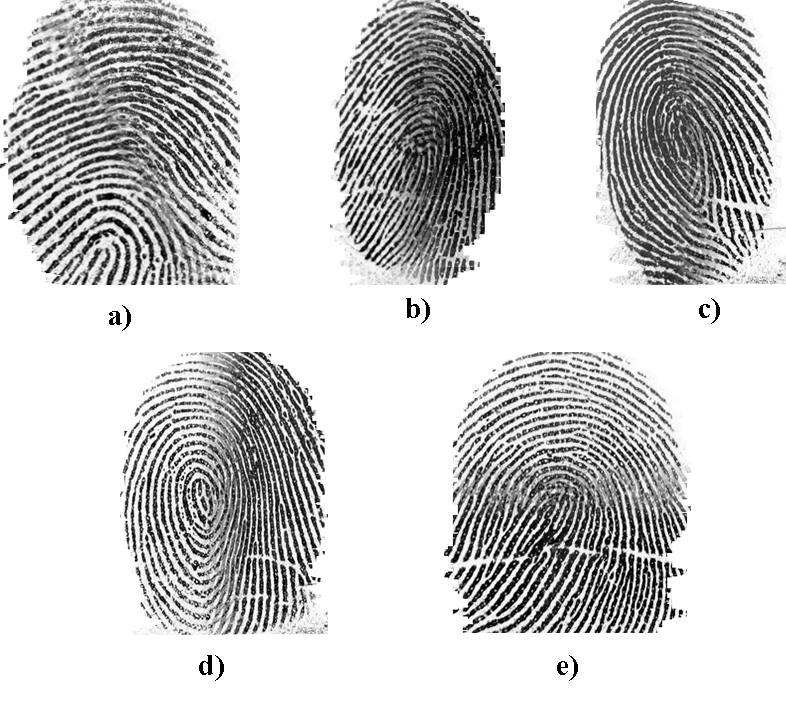
<style>
.page{position:relative;width:786px;height:701px;background:#ffffff}
.page>*{position:absolute;margin:0}
.t1{font:30px "TimesNewRomanPS-BoldMT";color:#000000}
</style>
<div class="page">
<p class="t1" style="left:109px;top:305px;width:22px;height:26px">a)</p>
<p class="t1" style="left:406px;top:298px;width:24px;height:26px">b)</p>
<p class="t1" style="left:699px;top:298px;width:21px;height:26px">c)</p>
<p class="t1" style="left:199px;top:655px;width:25px;height:26px">d)</p>
<p class="t1" style="left:557px;top:655px;width:21px;height:26px">e)</p>
</div>
